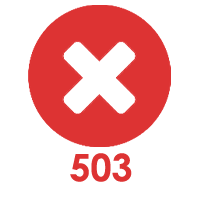
<style>
.page{position:relative;width:200px;height:200px;background:#ffffff}
.page>*{position:absolute;margin:0}
.t1{font:37.5px "CenturyGothic-Bold";color:#dd3333}
</style>
<div class="page">
<p class="t1" style="left:70px;top:153px;width:62px;height:29px">503</p>
</div>
